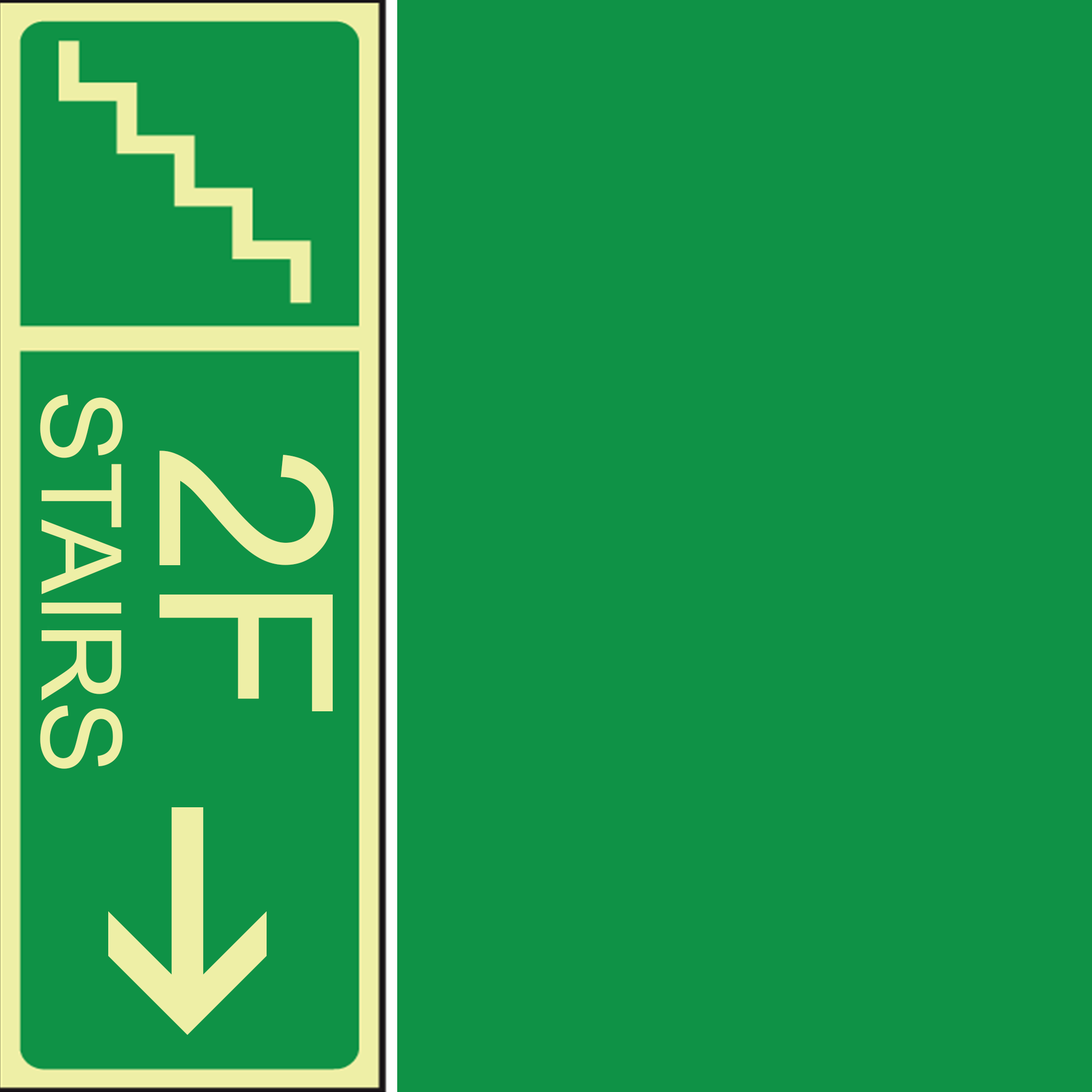
<style>
.page{position:relative;width:1092px;height:1092px;background:#0f9246}
.page>*{position:absolute;margin:0}
.t1{font:110.8px "ArialMT";letter-spacing:-0.04em;color:#eeefa6;font-weight:bold}
.t2{font:241.4px "ArialMT";letter-spacing:-0.04em;color:#eeefa6;font-weight:bold}
</style>
<div class="page">
<p class="t1" style="left:40px;top:395px;width:83px;height:374px;rotate:90deg">STAIRS</p>
<p class="t2" style="left:159px;top:451px;width:175px;height:260px;rotate:90deg">2F</p>
</div>
